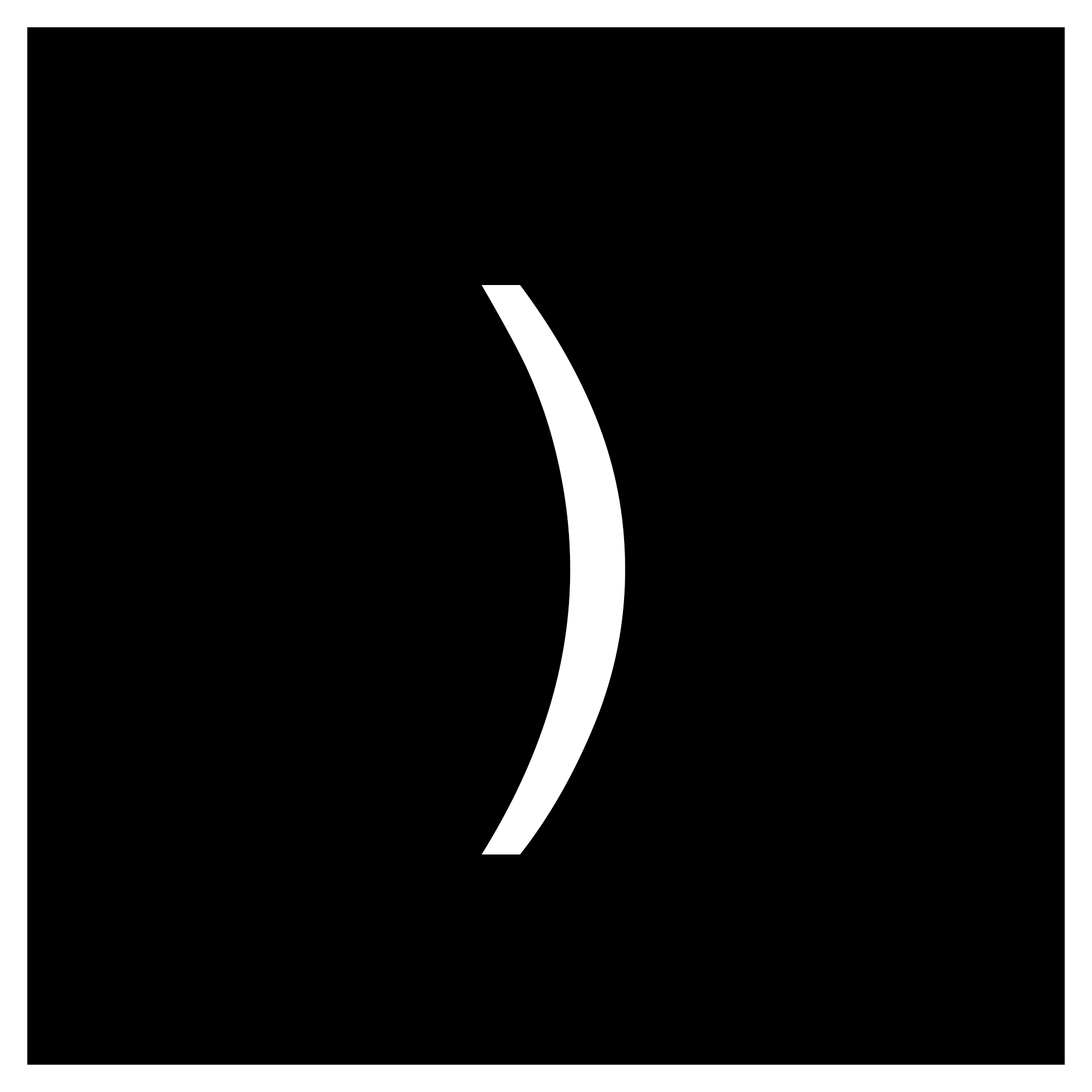
<style>
.page{position:relative;width:1092px;height:1092px;background:#000000}
.page>*{position:absolute;margin:0}
.t1{font:606.7px "ArialMT";color:#ffffff}
</style>
<div class="page">
<p class="t1" style="left:482px;top:285px;width:143px;height:569px">)</p>
</div>
